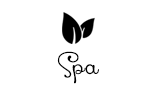
<style>
.page{position:relative;width:150px;height:100px;background:#ffffff}
.page>*{position:absolute;margin:0}
.t1{font:22px "Xiomara";letter-spacing:0.05em;color:#010101}
</style>
<div class="page">
<p class="t1" style="left:57px;top:51px;width:42px;height:33px">Spa</p>
</div>
